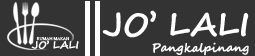
<style>
.page{position:relative;width:255px;height:56px;background:#333333}
.page>*{position:absolute;margin:0}
.t1{font:32.2px "SegoeScript-Bold";color:#ffffff}
.t2{font:10.3px "SegoeScript-Bold";color:#ffffff}
.t3{font:3.9px "PalatinoLinotype-Roman";color:#ffffff}
.t4{font:12px "SegoeScript-Bold";color:#ffffff}
</style>
<div class="page">
<p class="t1" style="left:102px;top:10px;width:147px;height:28px">JO’ LALI</p>
<p class="t2" style="left:31px;top:40px;width:48px;height:9px">JO’ LALI</p>
<p class="t3" style="left:36px;top:37px;width:34px;height:4px">RUMAH MAKAN</p>
<p class="t4" style="left:152px;top:42px;width:97px;height:14px">Pangkalpinang</p>
</div>
